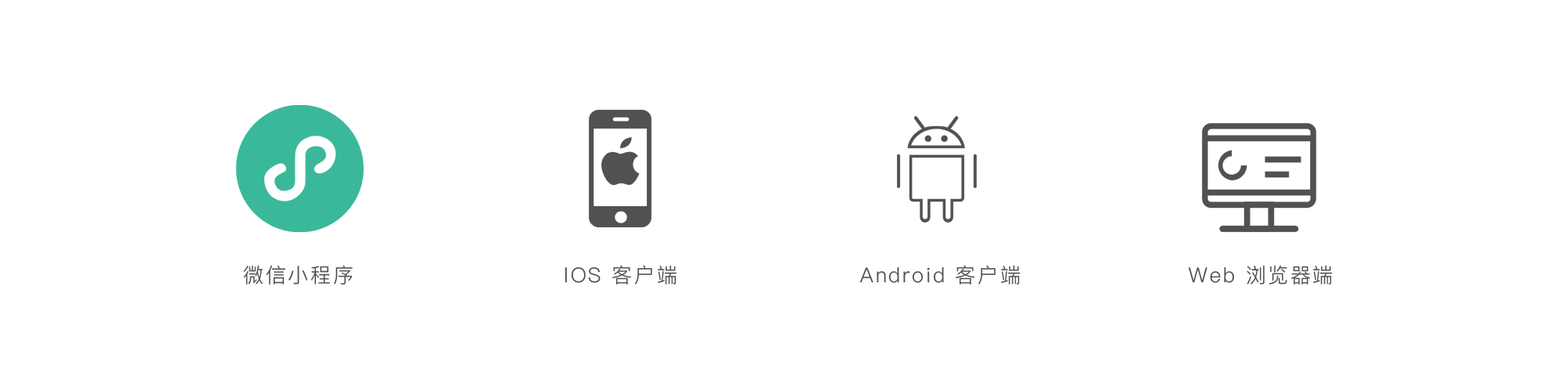
<style>
.page{position:relative;width:1568px;height:392px;background:#ffffff}
.page>*{position:absolute;margin:0}
.t1{font:20.4px "PingFangSC-Light";letter-spacing:0.1em;color:#515151}
</style>
<div class="page">
<p class="t1" style="left:243px;top:265px;width:110px;height:20px">微信小程序</p>
<p class="t1" style="left:565px;top:265px;width:112px;height:20px">IOS 客户端</p>
<p class="t1" style="left:860px;top:265px;width:160px;height:20px">Android 客户端</p>
<p class="t1" style="left:1189px;top:265px;width:143px;height:20px">Web 浏览器端</p>
</div>
